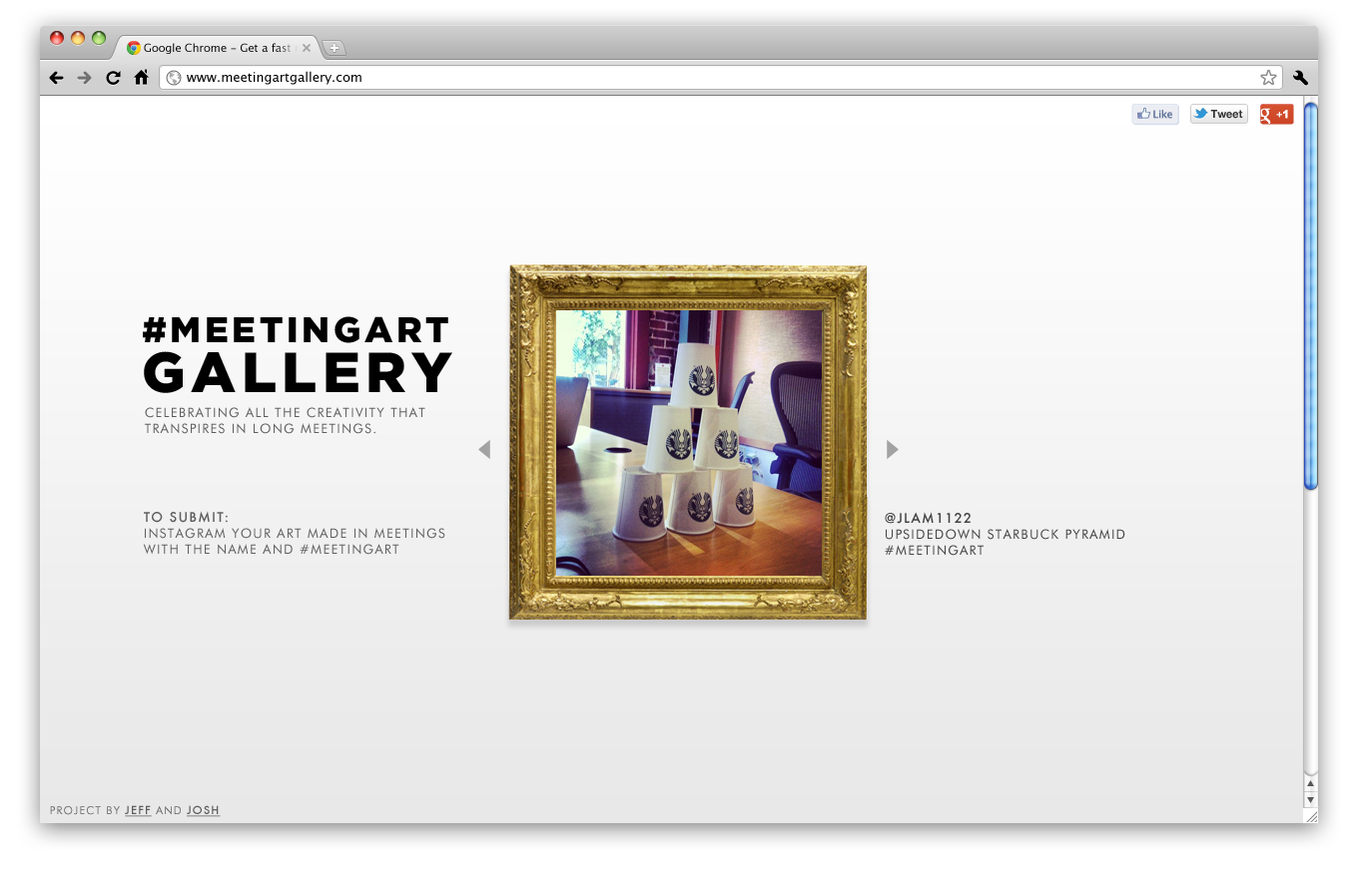
<style>
.page{position:relative;width:1358px;height:878px}
.page>*{position:absolute;margin:0}
.t1{font:11px "LucidaGrande"}
.t2{font:13px "LucidaGrande";color:#000000}
.t3{font:11px "HelveticaNeue-Bold";letter-spacing:-0.005em;color:#323232}
.t4{font:35.6px "Gotham-Black";letter-spacing:0.1em;color:#000000;text-transform:uppercase}
.t5{font:56.5px/49.7px "Gotham-Black";letter-spacing:0.1em;color:#000000;text-transform:uppercase}
.t6{font:13px "FuturaBT-Book";letter-spacing:0.1em;color:#5d5d5d;text-transform:uppercase}
.t7{font:13px "Futura-Medium";letter-spacing:0.1em;color:#5d5d5d;text-transform:uppercase}
.t8{font:13px "FuturaBT-Book";letter-spacing:0.1em;color:#404040;text-transform:uppercase}
.t9{font:13px "Futura-Medium";letter-spacing:0.1em;color:#404040;text-transform:uppercase}
.t10{font:11px "FuturaBT-Book";letter-spacing:0.1em;color:#5d5d5d;text-transform:uppercase}
.t11{font:11px "Futura-Medium";letter-spacing:0.1em;color:#5d5d5d;text-transform:uppercase;text-decoration:underline}
</style>
<div class="page">
<p class="t1" style="left:144px;top:43px;width:350px;height:11px">Google Chrome - Get a fast new browser. For PC, Mac, and Linux.</p>
<p class="t2" style="left:187px;top:71px;width:174px;height:14px">www.meetingartgallery.com</p>
<p class="t3" style="left:1210px;top:110px;width:33px;height:9px">Tweet</p>
<p class="t4" style="left:143px;top:316px;width:309px;height:77px">#MeetingArt<br><span class="t5">Gallery</span></p>
<p class="t6" style="left:145px;top:407px;width:280px;height:27px">celebrating all the creativity that transpires in long meetings.</p>
<p class="t6" style="left:143px;top:511px;width:302px;height:44px"><span class="t7">to submit: <br></span>instagram your art made in meetings with the name and #meetingart</p>
<p class="t8" style="left:884px;top:512px;width:241px;height:44px"><span class="t9">@jlam1122<br></span>upsidedown starbuck pyramid <br>#meetingart</p>
<p class="t10" style="left:50px;top:806px;width:171px;height:12px">project by <span class="t11">Jeff </span>and <span class="t11">Josh</span></p>
</div>
